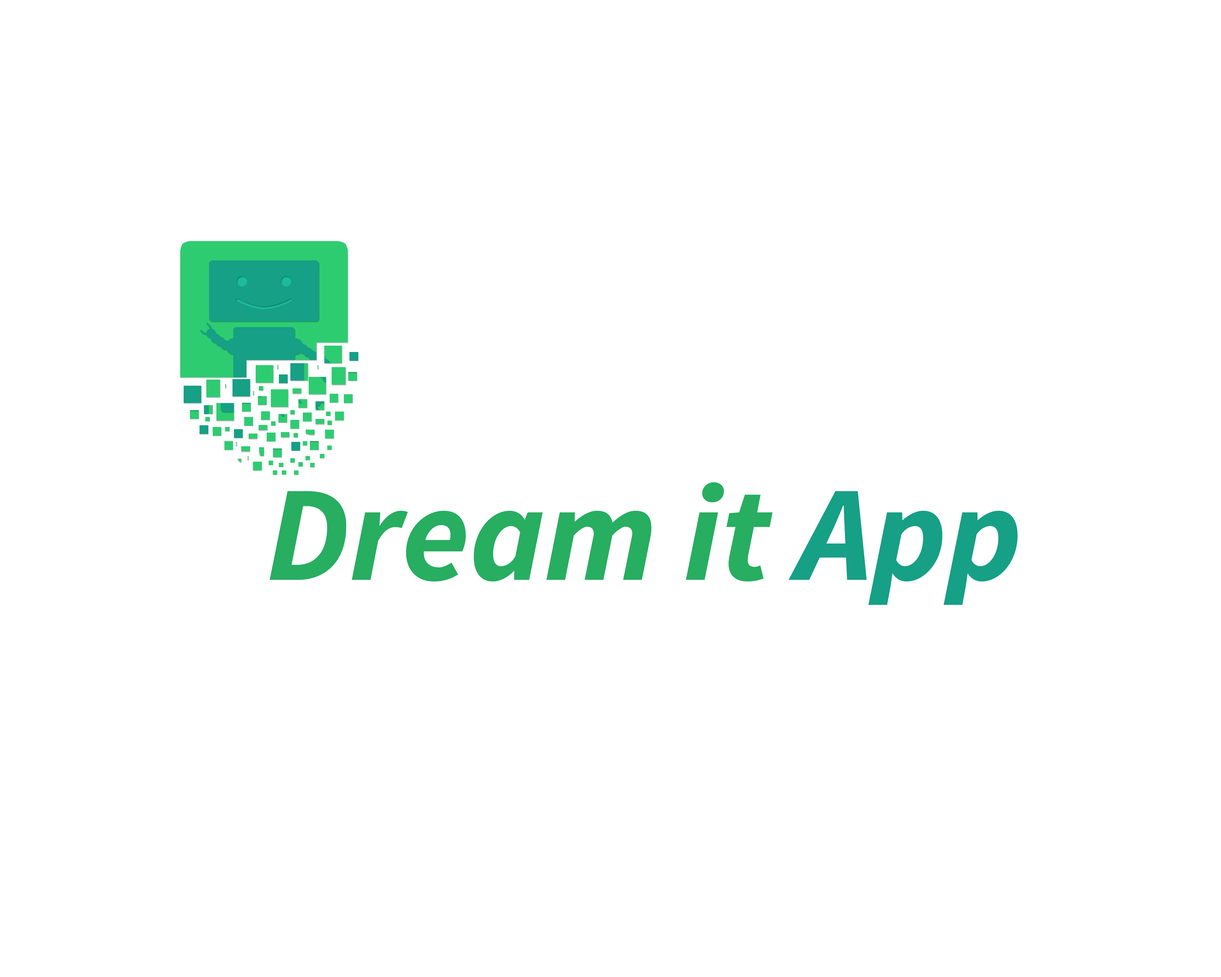
<style>
.page{position:relative;width:1221px;height:977px;background:#ffffff}
.page>*{position:absolute;margin:0}
.t1{font:136px "SourceSansPro-BoldIt";color:#27ae60}
.t2{font:136px "SourceSansPro-BoldIt";color:#16a085}
</style>
<div class="page">
<p class="t1" style="left:270px;top:482px;width:747px;height:123px">Dream it <span class="t2">App</span></p>
</div>
